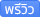
<style>
.page{position:relative;width:40px;height:17px}
.page>*{position:absolute;margin:0}
.t1{font:14px "NotoSansThai-Regular";color:#ffffff}
</style>
<div class="page">
<p class="t1" style="left:5px;top:3px;width:29px;height:12px">พรีวิว</p>
</div>
